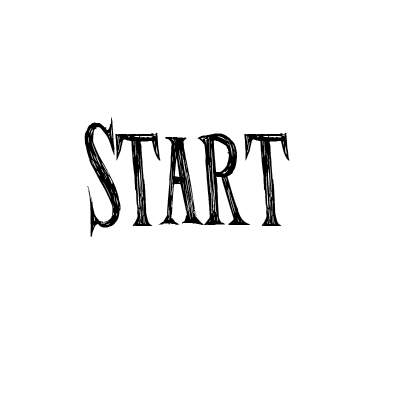
<style>
.page{position:relative;width:400px;height:400px;background:#ffffff}
.page>*{position:absolute;margin:0}
.t1{font:72.2px "LesMysteresdeParis";color:#000000}
</style>
<div class="page">
<p class="t1" style="left:84px;top:117px;width:206px;height:120px">Start</p>
</div>
